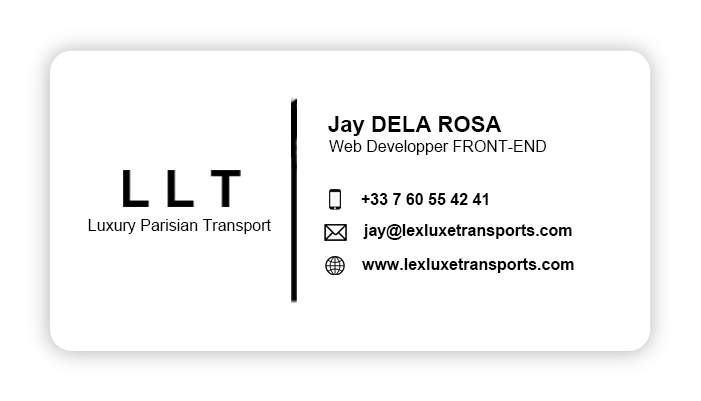
<style>
.page{position:relative;width:701px;height:401px;background:#ffffff}
.page>*{position:absolute;margin:0}
.t1{font:22.2px "Arial-BoldMT";color:#000000}
.t2{font:16px "ArialMT";color:#000000}
.t3{font:16px "Arial-BoldMT";color:#000000}
</style>
<div class="page">
<p class="t1" style="left:328px;top:116px;width:174px;height:20px">Jay DELA ROSA</p>
<p class="t2" style="left:329px;top:140px;width:217px;height:15px">Web Developper FRONT-END</p>
<p class="t3" style="left:361px;top:193px;width:127px;height:12px">+33 7 60 55 42 41</p>
<p class="t2" style="left:88px;top:219px;width:183px;height:15px">Luxury Parisian Transport</p>
<p class="t3" style="left:363px;top:224px;width:209px;height:16px">jay@lexluxetransports.com</p>
<p class="t3" style="left:362px;top:258px;width:212px;height:15px">www.lexluxetransports.com</p>
</div>
